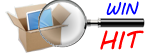
<style>
.page{position:relative;width:153px;height:55px;background:#ffffff}
.page>*{position:absolute;margin:0}
.t1{font:16px "MVBoli";color:#0000ff}
.t2{font:24px "MVBoli";color:#ff0000}
</style>
<div class="page">
<p class="t1" style="left:106px;top:1px;width:33px;height:14px">WIN</p>
<p class="t2" style="left:100px;top:30px;width:44px;height:20px">HIT</p>
</div>
